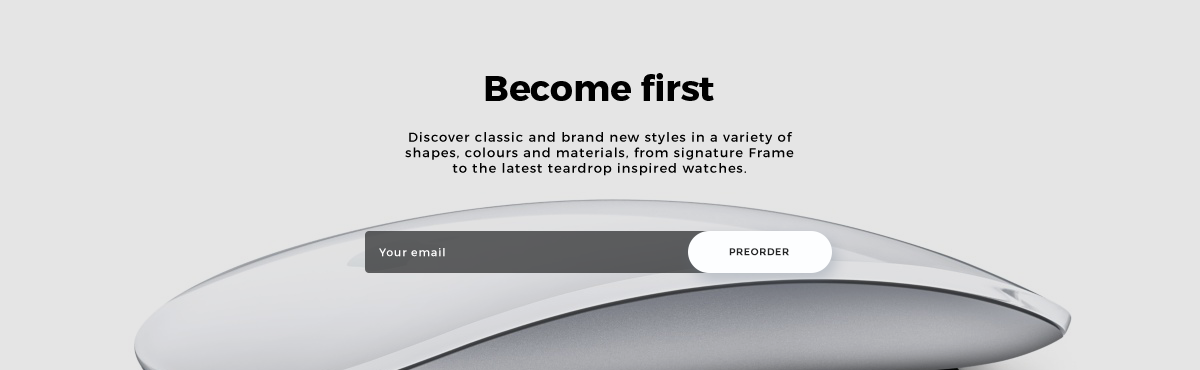
<style>
.page{position:relative;width:1200px;height:370px;background:#e5e5e5}
.page>*{position:absolute;margin:0}
.t1{font:36px "Montserrat-Bold";color:#000000}
.t2{font:13px "Montserrat-Regular";letter-spacing:0.08em;color:#000000}
.t3{font:11px "Montserrat-Regular";letter-spacing:0.08em;color:#ffffff}
.t4{font:10px "Montserrat-Bold";letter-spacing:0.04em;color:#242526;text-transform:uppercase}
</style>
<div class="page">
<p class="t1" style="left:485px;top:73px;width:229px;height:28px">Become first</p>
<p class="t2" style="left:405px;top:132px;width:389px;height:44px;text-align:center">Discover classic and brand new styles in a variety of<br>shapes, colours and materials, from signature Frame<br>to the latest teardrop inspired watches.</p>
<p class="t3" style="left:379px;top:248px;width:66px;height:9px">Your email</p>
<p class="t4" style="left:729px;top:248px;width:60px;height:8px">preorder</p>
</div>
